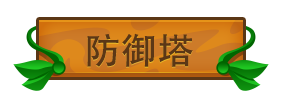
<style>
.page{position:relative;width:287px;height:103px;background:#ffffff}
.page>*{position:absolute;margin:0}
.t1{font:36px "AdobeHeitiStd-Regular";letter-spacing:0.025em;color:#5b3716}
</style>
<div class="page">
<p class="t1" style="left:87px;top:33px;width:106px;height:34px">防御塔</p>
</div>
